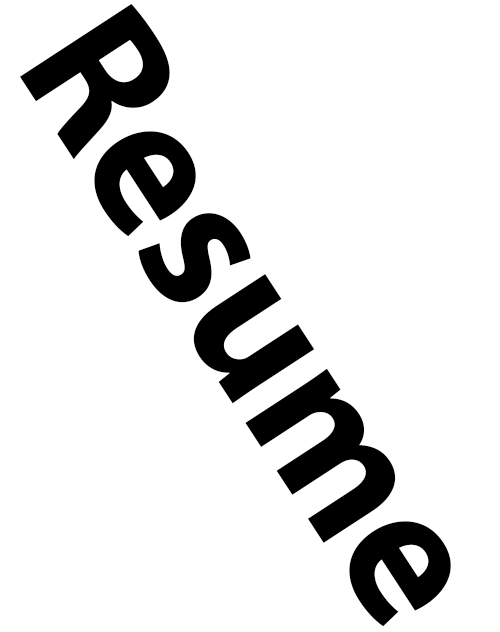
<style>
.page{position:relative;width:500px;height:632px;background:#ffffff}
.page>*{position:absolute;margin:0}
.t1{font:200px "MyriadPro-Bold";color:#000000;scale:0.97 1}
</style>
<div class="page">
<p class="t1" style="left:19px;top:4px;width:432px;height:623px;rotate:57deg">Resume</p>
</div>
